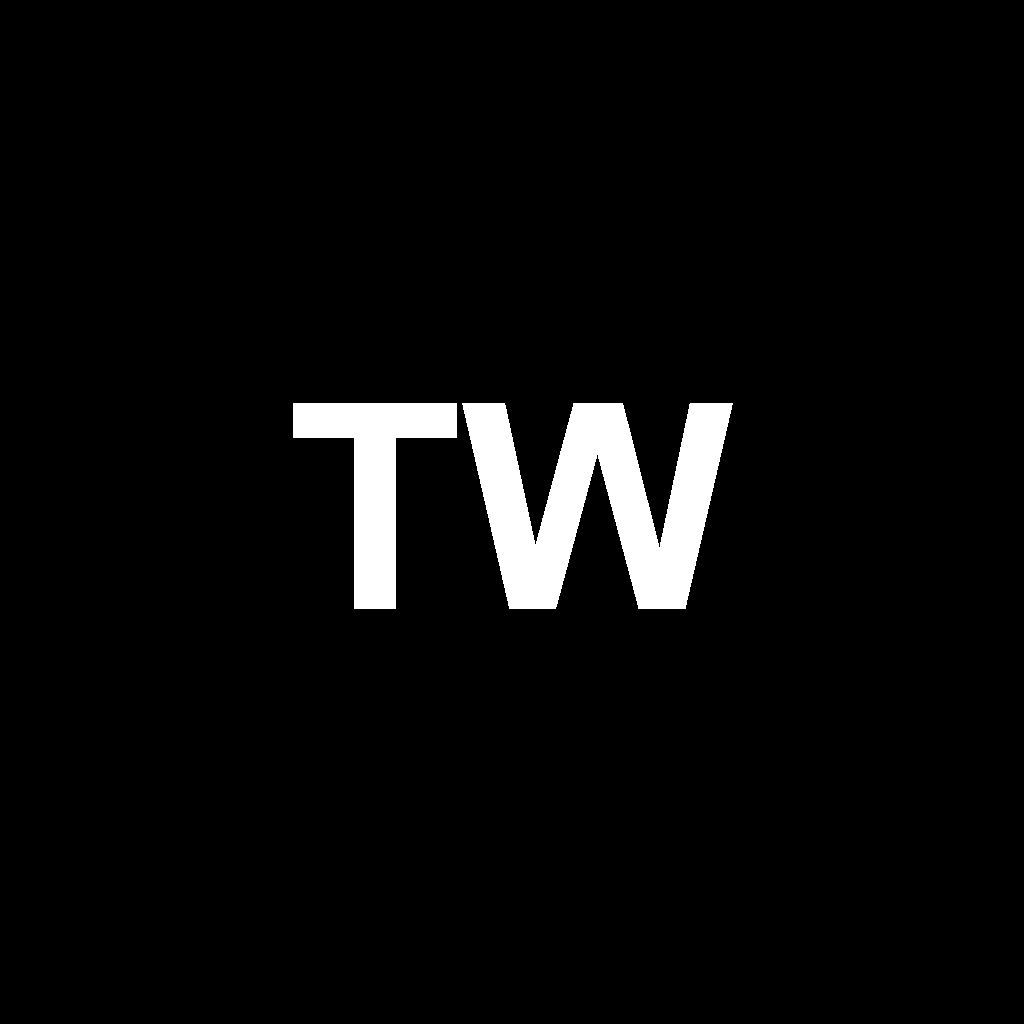
<style>
.page{position:relative;width:1024px;height:1024px;background:#000000}
.page>*{position:absolute;margin:0}
.t1{font:287.5px "Arial-BoldMT";color:#ffffff}
</style>
<div class="page">
<p class="t1" style="left:293px;top:403px;width:440px;height:206px">TW</p>
</div>
